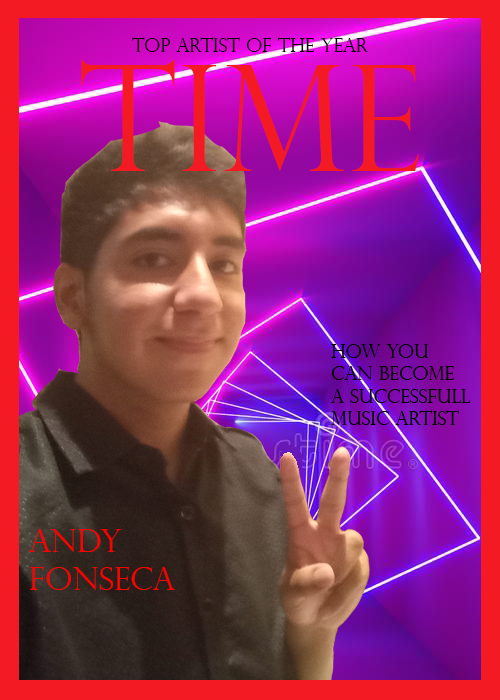
<style>
.page{position:relative;width:500px;height:700px}
.page>*{position:absolute;margin:0}
.t1{font:18.7px "PerpetuaTitlingMT-Light";color:#000000}
.t2{font:146.7px "PerpetuaTitlingMT-Light";color:#f41a23}
.t3{font:32px "PerpetuaTitlingMT-Light";color:#fd0000}
</style>
<div class="page">
<p class="t1" style="left:132px;top:37px;width:237px;height:15px">Top artist of the year</p>
<p class="t2" style="left:81px;top:59px;width:338px;height:112px">TIME</p>
<p class="t3" style="left:29px;top:529px;width:146px;height:61px">Andy <br>Fonseca</p>
</div>
